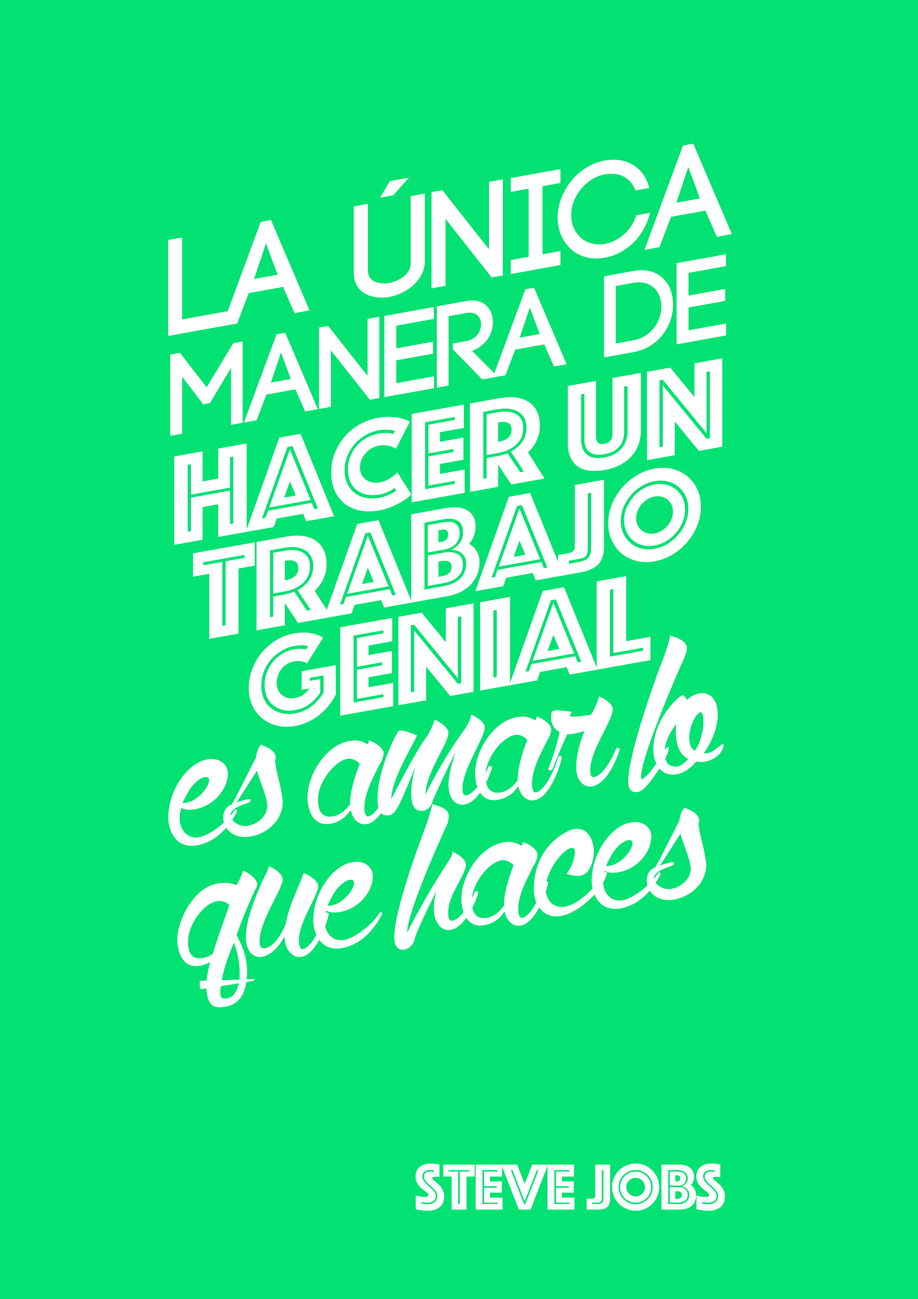
<style>
.page{position:relative;width:918px;height:1299px;background:#01e272}
.page>*{position:absolute;margin:0}
.t1{font:115.9px/100.2px "Code-Bold";letter-spacing:-0.02em;color:#ffffff}
.t2{font:137.1px/100.2px "Code-Bold";letter-spacing:-0.02em;color:#ffffff}
.t3{font:132.2px/100.2px "Phosphate-Inline";letter-spacing:-0.02em;color:#ffffff}
.t4{font:295.7px/123.4px "WolfintheCity";letter-spacing:-0.02em;color:#ffffff}
.t5{font:67.2px "Phosphate-Inline";letter-spacing:-0.02em;color:#ffffff}
</style>
<div class="page">
<p class="t1" style="left:168px;top:143px;width:564px;height:293px;text-align:center;rotate:-10deg"><span class="t2">La única<br></span>manera de</p>
<p class="t3" style="left:174px;top:358px;width:549px;height:369px;text-align:center;rotate:-10deg">hacer un<br>trabajo genial</p>
<p class="t4" style="left:168px;top:635px;width:556px;height:372px;text-align:center;rotate:-8deg">es amar lo <br>que haces</p>
<p class="t5" style="left:415px;top:1163px;width:311px;height:47px">Steve Jobs</p>
</div>
